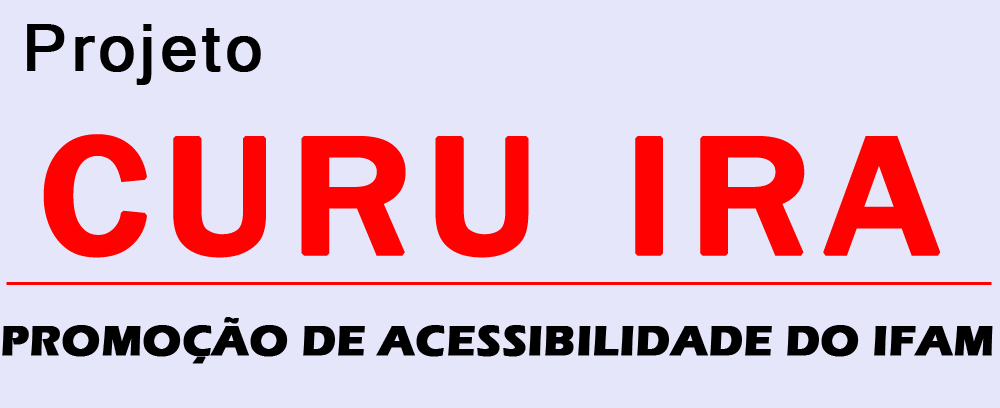
<style>
.page{position:relative;width:1000px;height:408px;background:#e6e6fa}
.page>*{position:absolute;margin:0}
.t1{font:72px "Vrinda";letter-spacing:0.05em;color:#000000;font-weight:bold}
.t2{font:172px "FranklinGothic-Medium";letter-spacing:0.05em;color:#ff0101;text-transform:uppercase;font-weight:bold;scale:1.1 1}
.t3{font:44px "ErasITC-Bold";color:#000000;text-transform:uppercase;font-weight:bold}
</style>
<div class="page">
<p class="t1" style="left:27px;top:24px;width:234px;height:61px">Projeto</p>
<p class="t2" style="left:43px;top:134px;width:898px;height:124px">Curu ira</p>
<p class="t3" style="left:2px;top:317px;width:991px;height:47px">Promoção de Acessibilidade do Ifam</p>
</div>
